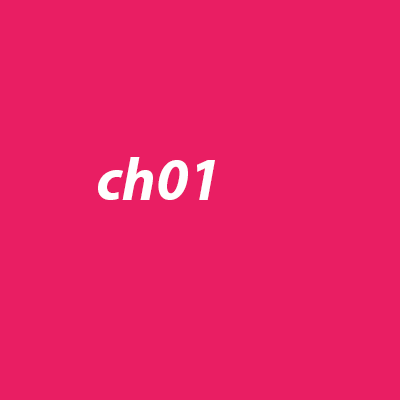
<style>
.page{position:relative;width:400px;height:400px;background:#e91e63}
.page>*{position:absolute;margin:0}
.t1{font:60px "MyriadPro-BoldIt";color:#fefefe}
</style>
<div class="page">
<p class="t1" style="left:98px;top:157px;width:117px;height:43px">ch01</p>
</div>
